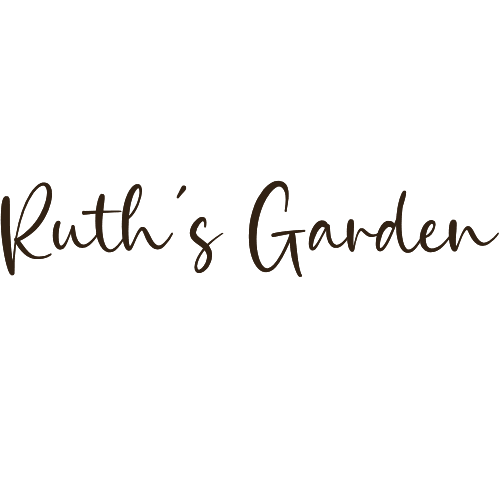
<style>
.page{position:relative;width:500px;height:500px;background:#ffffff}
.page>*{position:absolute;margin:0}
.t1{font:125px "FashionHistory";color:#322214}
</style>
<div class="page">
<p class="t1" style="left:0px;top:180px;width:499px;height:97px">Ruth’s Garden</p>
</div>
